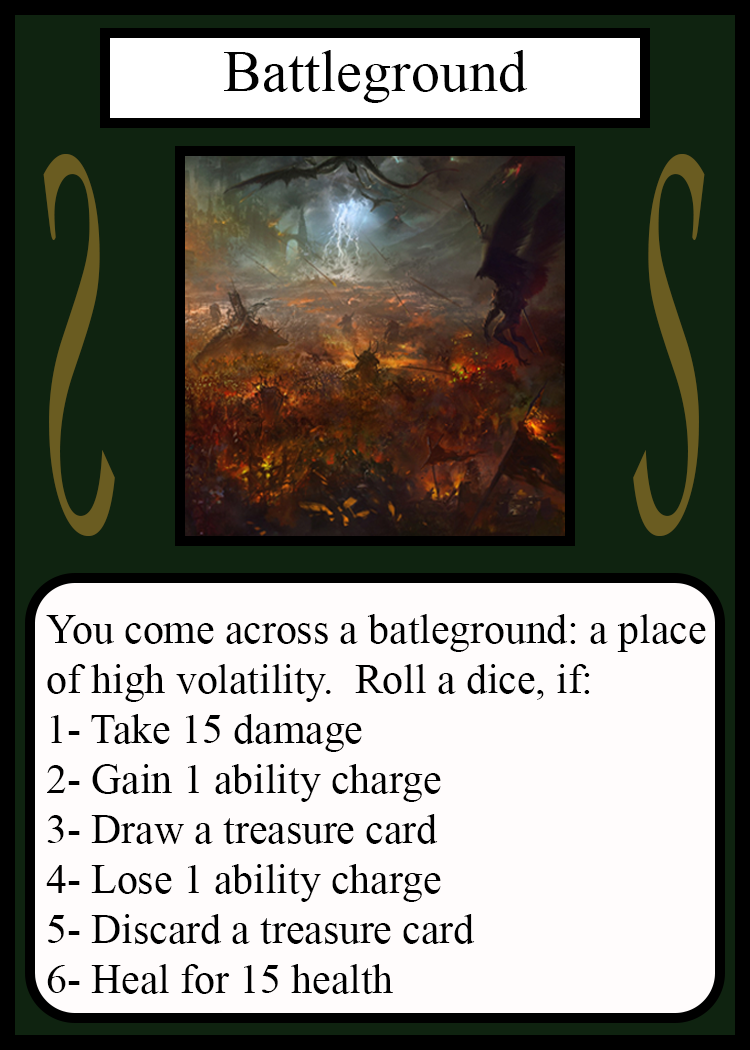
<style>
.page{position:relative;width:750px;height:1050px;background:#fffcfc}
.page>*{position:absolute;margin:0}
.t1{font:58.3px "TimesNewRomanPSMT";color:#010101}
.t2{font:548.5px "Apple-Chancery";color:#6a5c21;scale:0.27 1}
.t3{font:548.2px "Apple-Chancery";color:#6a5c21;scale:0.27 1}
.t4{font:41.7px "TimesNewRomanPSMT";color:#000000}
</style>
<div class="page">
<p class="t1" style="left:224px;top:50px;width:304px;height:53px">Battleground</p>
<p class="t2" style="left:43px;top:154px;width:72px;height:382px;rotate:180deg">S</p>
<p class="t3" style="left:633px;top:154px;width:72px;height:382px">S</p>
<p class="t4" style="left:46px;top:614px;width:660px;height:380px">You come across a batleground: a place<br>of high volatility.  Roll a dice, if:<br>1- Take 15 damage<br>2- Gain 1 ability charge<br>3- Draw a treasure card<br>4- Lose 1 ability charge<br>5- Discard a treasure card<br>6- Heal for 15 health</p>
</div>
